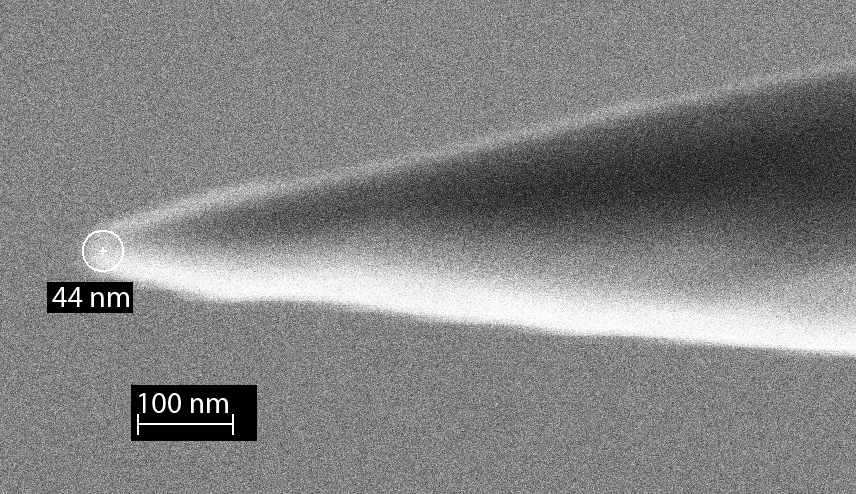
<style>
.page{position:relative;width:856px;height:494px}
.page>*{position:absolute;margin:0}
.t1{font:30px "MyriadPro-Regular";color:#ffffff}
</style>
<div class="page">
<p class="t1" style="left:52px;top:287px;width:77px;height:20px">44 nm</p>
<p class="t1" style="left:139px;top:393px;width:89px;height:20px">100 nm</p>
</div>
